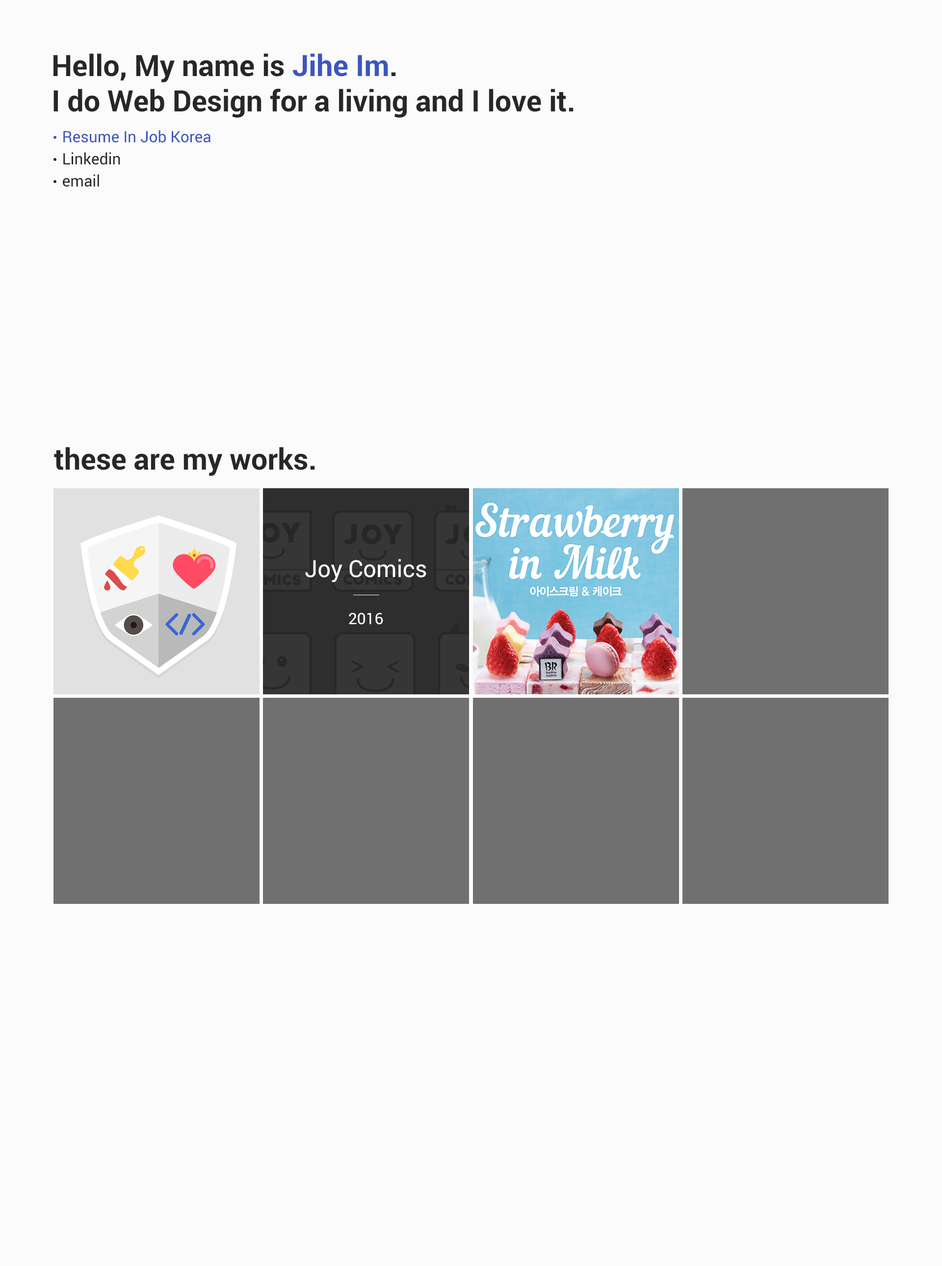
<style>
.page{position:relative;width:942px;height:1266px;background:#fbfbfb}
.page>*{position:absolute;margin:0}
.t1{font:29.4px "Roboto-Bold";color:#272727}
.t2{font:29.4px "Roboto-Bold";color:#3c56be}
.t3{font:15.7px "Roboto-Regular";color:#3c56be}
.t4{font:15.7px "Roboto-Regular";color:#272727}
.t5{font:23.6px "Roboto-Regular";color:#ffffff}
.t6{font:15.7px "Roboto-Regular";color:#ffffff}
</style>
<div class="page">
<p class="t1" style="left:53px;top:53px;width:521px;height:65px">Hello, My name is <span class="t2">Jihe Im</span>.<br>I do Web Design for a living and I love it.</p>
<p class="t3" style="left:63px;top:130px;width:147px;height:13px">Resume In Job Korea</p>
<p class="t4" style="left:63px;top:152px;width:57px;height:13px">Linkedin</p>
<p class="t4" style="left:63px;top:174px;width:36px;height:13px">email</p>
<p class="t1" style="left:54px;top:447px;width:261px;height:29px">these are my works.</p>
<p class="t5" style="left:305px;top:559px;width:121px;height:23px">Joy Comics</p>
<p class="t6" style="left:349px;top:613px;width:34px;height:12px">2016</p>
</div>
